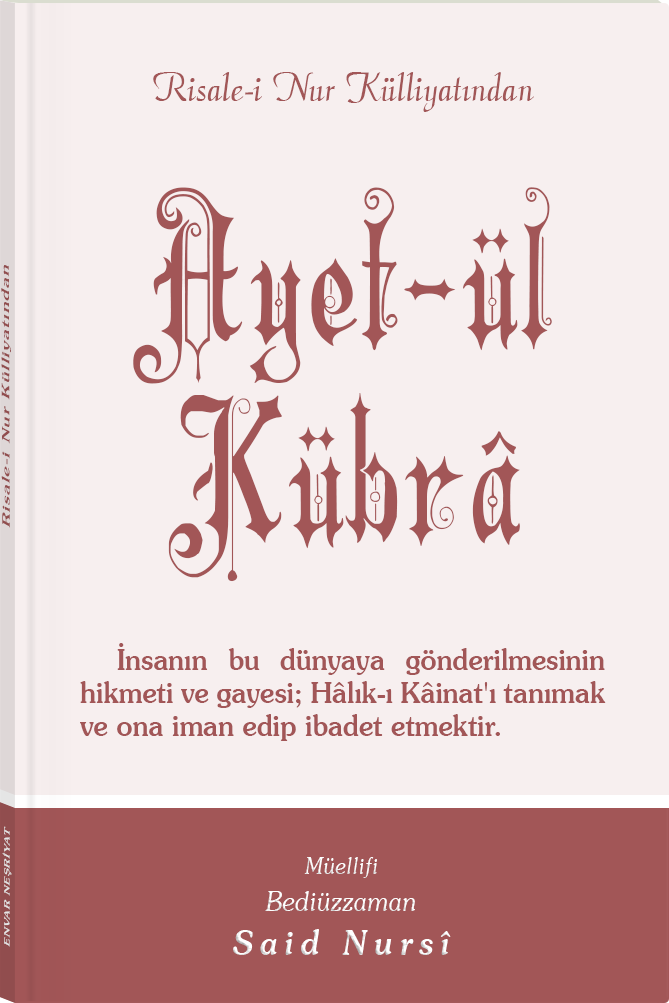
<style>
.page{position:relative;width:669px;height:1003px;background:#f7efef}
.page>*{position:absolute;margin:0}
.t1{font:45.3px "Barla © 072 Aria ScriptScriptSSi";color:#a25657;scale:0.94 1}
.t2{font:198.8px/177.4px "Barla © 001 Liva Nur";letter-spacing:-0.001em;color:#a25657;scale:0.93 1}
.t3{font:198.8px/198.5px "Barla © 001 Liva Nur";letter-spacing:-0.001em;color:#a25657;scale:0.93 1}
.t4{font:11.4px "Souvenir-Medium";letter-spacing:0.08em;color:#a25657;scale:1.65 1}
.t5{font:29.3px/33px "Souvenir-Medium";color:#a25657;scale:0.92 1}
.t6{font:8.3px "Souvenir-Medium";letter-spacing:0.08em;color:#e5e5e5;scale:1.43 1}
.t7{font:27.1px/37.8px "Souvenir-LightItalic";color:#ffffff;scale:0.92 1}
.t8{font:22.8px/39.8px "Souvenir-LightItalic";color:#ffffff;scale:0.92 1}
.t9{font:33.9px/43.8px "Souvenir-MediumItalic";letter-spacing:0.2em;color:#ffffff;scale:0.92 1}
</style>
<div class="page">
<p class="t1" style="left:153px;top:72px;width:381px;height:40px">Risale-i Nur Külliyatından</p>
<p class="t2" style="left:133px;top:187px;width:419px;height:395px;text-align:center">Ayet-ül<br><span class="t3">Kübrâ</span></p>
<p class="t4" style="left:1px;top:265px;width:10px;height:263px;rotate:-90deg">Risale-i Nur Külliyatından</p>
<p class="t5" style="left:80px;top:643px;width:526px;height:98px;text-align:justify">İnsanın bu dünyaya gönderilmesinin hikmeti ve gayesi; Hâlık-ı Kâinat'ı tanımak ve ona iman edip ibadet etmektir.</p>
<p class="t6" style="left:2px;top:826px;width:10px;height:121px;rotate:-90deg">ENVAR NEŞRİYAT</p>
<p class="t7" style="left:233px;top:857px;width:218px;height:98px;text-align:center"><span class="t8">Müellifi<br></span>Bediüzzaman<br><span class="t9">Said Nursî</span></p>
</div>
